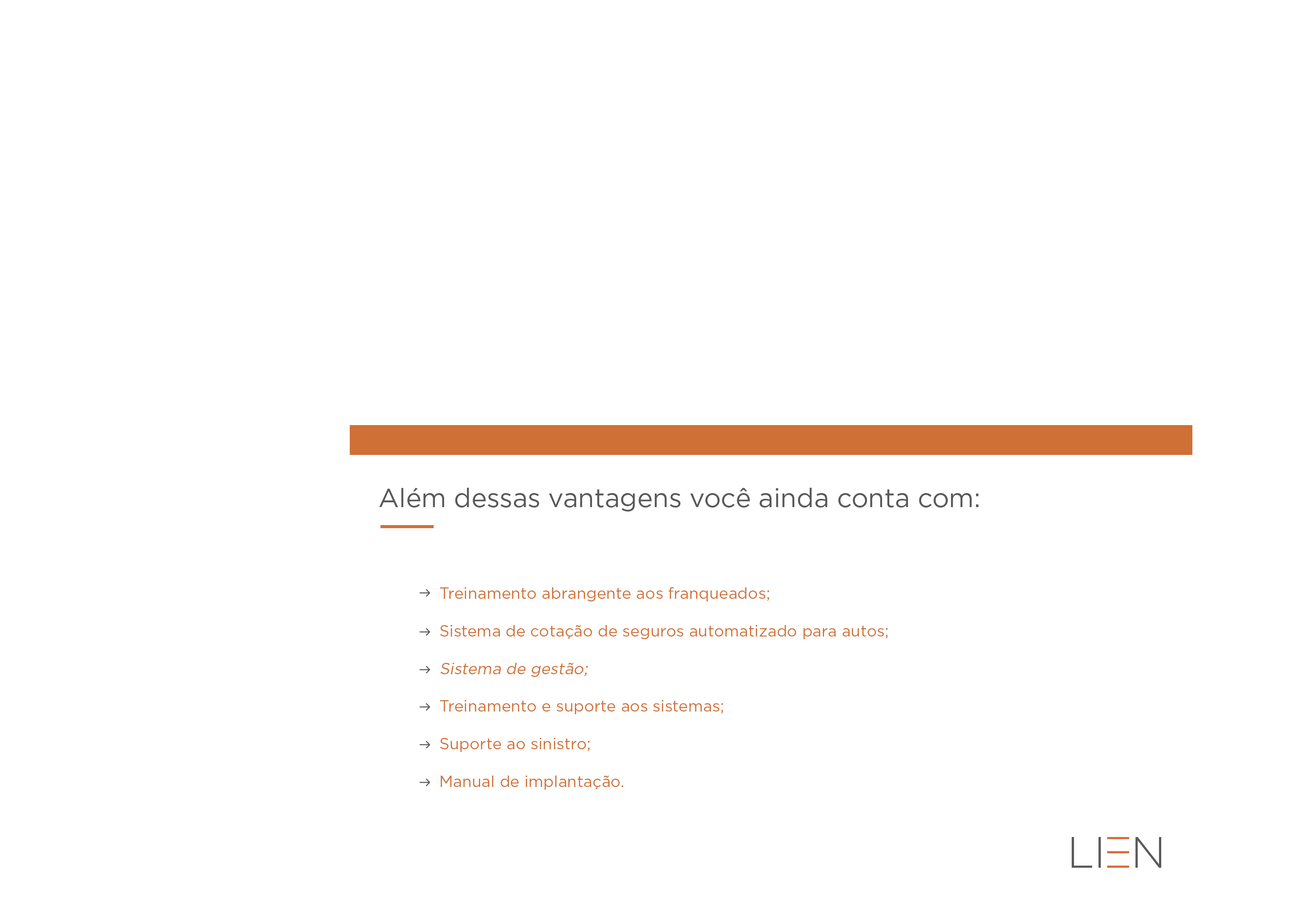
<style>
.page{position:relative;width:1292px;height:923px;background:#ffffff}
.page>*{position:absolute;margin:0}
.t1{font:26.3px "Gotham-Book";letter-spacing:-0.005em;color:#58595b}
.t2{font:15.8px "Gotham-Book";color:#cf7036}
.t3{font:15.8px "Gotham-Book";color:#cf7036;font-style:italic}
</style>
<div class="page">
<p class="t1" style="left:379px;top:487px;width:599px;height:25px">Além dessas vantagens você ainda conta com:</p>
<p class="t2" style="left:440px;top:587px;width:329px;height:15px">Treinamento abrangente aos franqueados;</p>
<p class="t2" style="left:440px;top:625px;width:448px;height:14px">Sistema de cotação de seguros automatizado para autos;</p>
<p class="t3" style="left:440px;top:663px;width:148px;height:14px">Sistema de gestão;</p>
<p class="t2" style="left:440px;top:700px;width:283px;height:14px">Treinamento e suporte aos sistemas;</p>
<p class="t2" style="left:440px;top:738px;width:150px;height:14px">Suporte ao sinistro;</p>
<p class="t2" style="left:441px;top:775px;width:182px;height:15px">Manual de implantação.</p>
</div>
